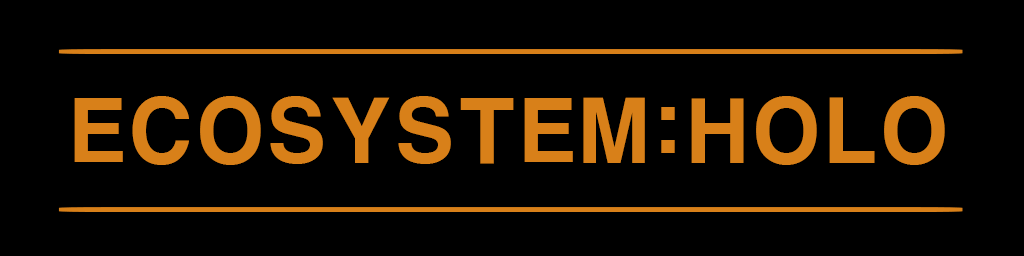
<style>
.page{position:relative;width:1024px;height:256px;background:#000000}
.page>*{position:absolute;margin:0}
.t1{font:41px "ConthraxSb-Regular";color:#d88019;scale:65.38 1}
.t2{font:85.1px "H2gtrE";color:#d88019}
</style>
<div class="page">
<p class="t1" style="left:58px;top:49px;width:905px;height:5px">-</p>
<p class="t2" style="left:74px;top:96px;width:871px;height:69px">ECOSYSTEM:HOLO</p>
<p class="t1" style="left:58px;top:207px;width:905px;height:5px">-</p>
</div>
